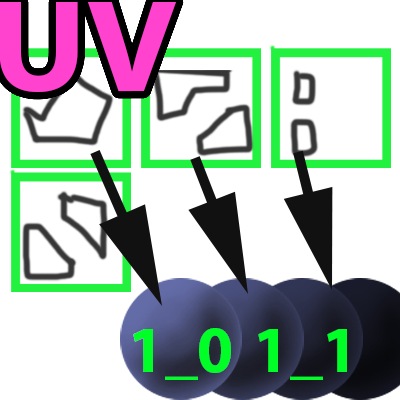
<style>
.page{position:relative;width:400px;height:400px;background:#ffffff}
.page>*{position:absolute;margin:0}
.t1{font:132.7px "MyriadPro-Bold";color:#ff43ce;scale:1.07 1}
.t2{font:66.7px "MyriadPro-Bold";color:#00ff27}
</style>
<div class="page">
<p class="t1" style="left:0px;top:2px;width:176px;height:91px">UV</p>
<p class="t2" style="left:133px;top:328px;width:98px;height:52px">1_0</p>
<p class="t2" style="left:258px;top:329px;width:89px;height:51px">1_1</p>
</div>
